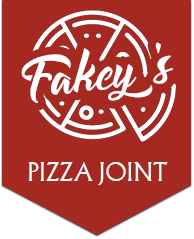
<style>
.page{position:relative;width:194px;height:239px;background:#a52921}
.page>*{position:absolute;margin:0}
.t1{font:83.3px "Amontilladios";color:#ffffff}
.t2{font:25.1px "AlbertusMT-Light";color:#ffffff;text-transform:uppercase}
</style>
<div class="page">
<p class="t1" style="left:21px;top:42px;width:152px;height:61px;rotate:-7deg">Fakey’s</p>
<p class="t2" style="left:29px;top:162px;width:64px;height:19px">Pizza</p>
<p class="t2" style="left:98px;top:162px;width:70px;height:23px">JOINT</p>
</div>
